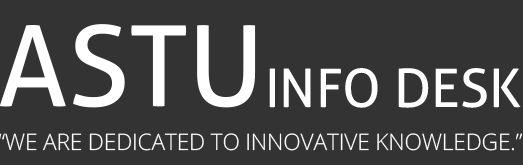
<style>
.page{position:relative;width:523px;height:165px;background:#333333}
.page>*{position:absolute;margin:0}
.t1{font:112.4px "Aller";color:#ffffff}
.t2{font:53.2px "Aller";color:#ffffff}
.t3{font:22.8px "OpenSans-Light";letter-spacing:-0.01em;color:#ffffff}
</style>
<div class="page">
<p class="t1" style="left:0px;top:24px;width:256px;height:84px">ASTU</p>
<p class="t2" style="left:269px;top:68px;width:252px;height:40px">INFO DESK</p>
<p class="t3" style="left:0px;top:133px;width:523px;height:18px">“WE ARE DEDICATED TO INNOVATIVE KNOWLEDGE.”</p>
</div>
